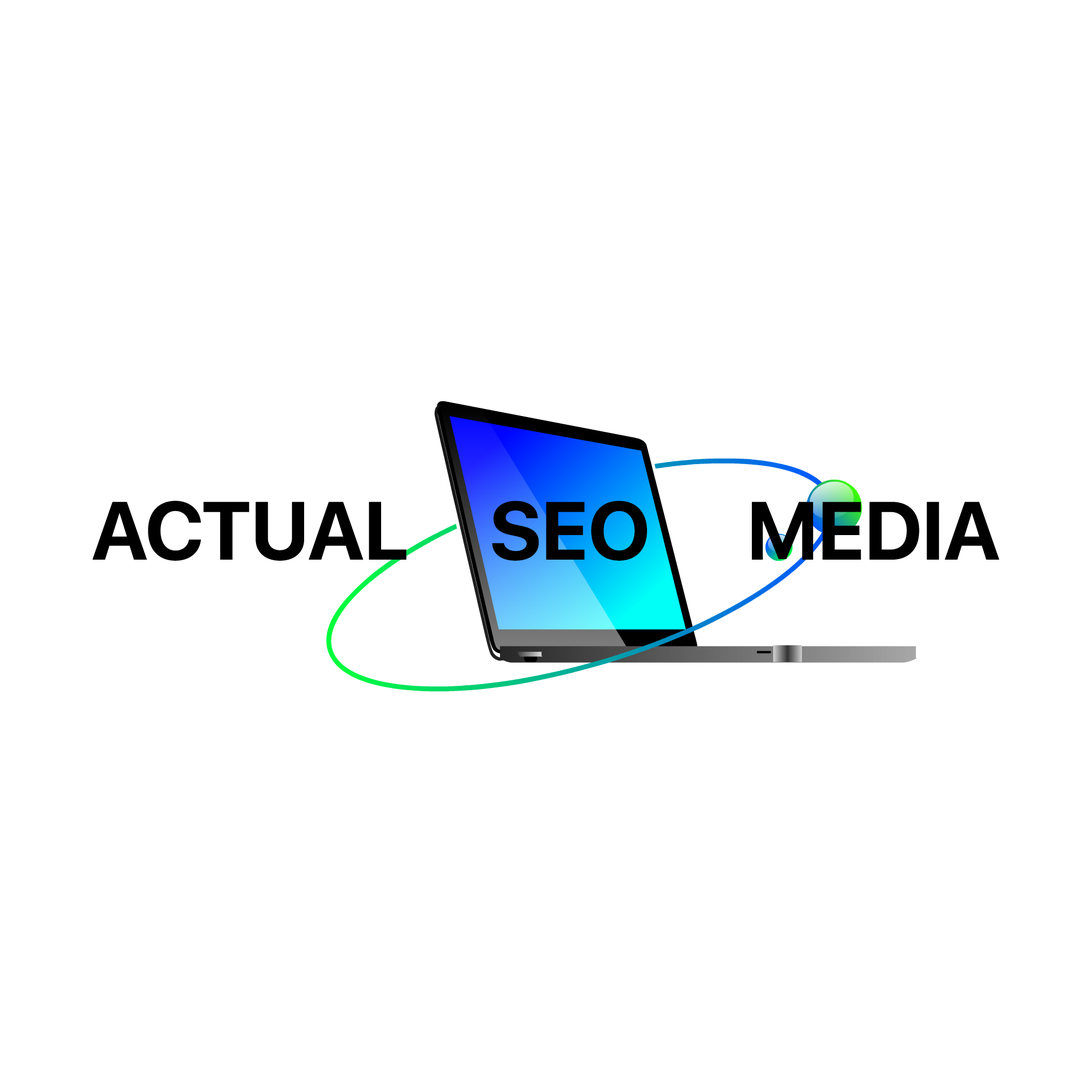
<style>
.page{position:relative;width:1092px;height:1092px;background:#ffffff}
.page>*{position:absolute;margin:0}
.t1{font:81.9px "SFProDisplay-Bold";color:#000000}
</style>
<div class="page">
<p class="t1" style="left:92px;top:501px;width:907px;height:60px">ACTUAL     SEO      MEDIA</p>
</div>
